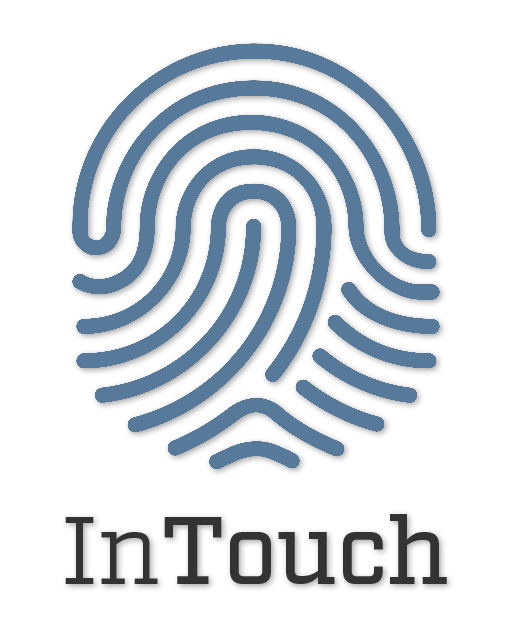
<style>
.page{position:relative;width:512px;height:640px;background:#ffffff}
.page>*{position:absolute;margin:0}
.t1{font:96px "Factoria-Medium";color:#333333}
.t2{font:96px "Factoria-Book";color:#333333}
</style>
<div class="page">
<p class="t1" style="left:65px;top:514px;width:382px;height:70px"><span class="t2">In</span>Touch</p>
</div>
